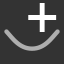
<style>
.page{position:relative;width:64px;height:64px;background:#333333}
.page>*{position:absolute;margin:0}
.t1{font:72px "ArialNarrow";color:#ffffff}
</style>
<div class="page">
<p class="t1" style="left:28px;top:3px;width:29px;height:29px">+</p>
</div>
